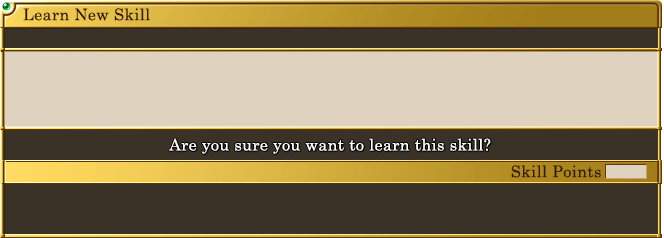
<style>
.page{position:relative;width:664px;height:238px;background:#3b3227}
.page>*{position:absolute;margin:0}
.t1{font:16px "CenturySchoolbook";letter-spacing:0.025em;color:#321a02}
.t2{font:16px "CenturySchoolbook";letter-spacing:0.025em;color:#ffffff}
</style>
<div class="page">
<p class="t1" style="left:23px;top:8px;width:127px;height:13px">Learn New Skill</p>
<p class="t2" style="left:169px;top:138px;width:322px;height:16px">Are you sure you want to learn this skill?</p>
<p class="t1" style="left:511px;top:165px;width:90px;height:13px">Skill Points</p>
</div>
